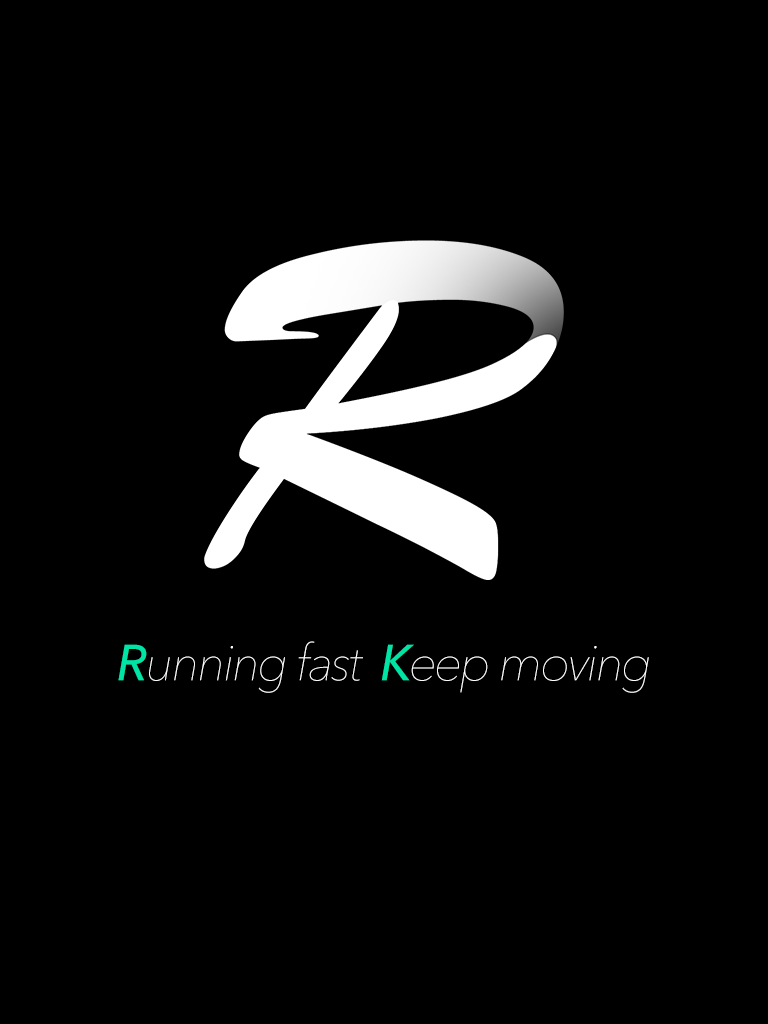
<style>
.page{position:relative;width:768px;height:1024px;background:#000000}
.page>*{position:absolute;margin:0}
.t1{font:50.1px "AvenirNext-UltraLightItalic";letter-spacing:-0.05em;color:#ffffff}
.t2{font:50.1px "AvenirNext-MediumItalic";letter-spacing:-0.05em;color:#00e4a6;text-transform:uppercase}
</style>
<div class="page">
<p class="t1" style="left:118px;top:641px;width:531px;height:52px"><span class="t2">R</span>unning fast  <span class="t2">K</span>eep moving</p>
</div>
